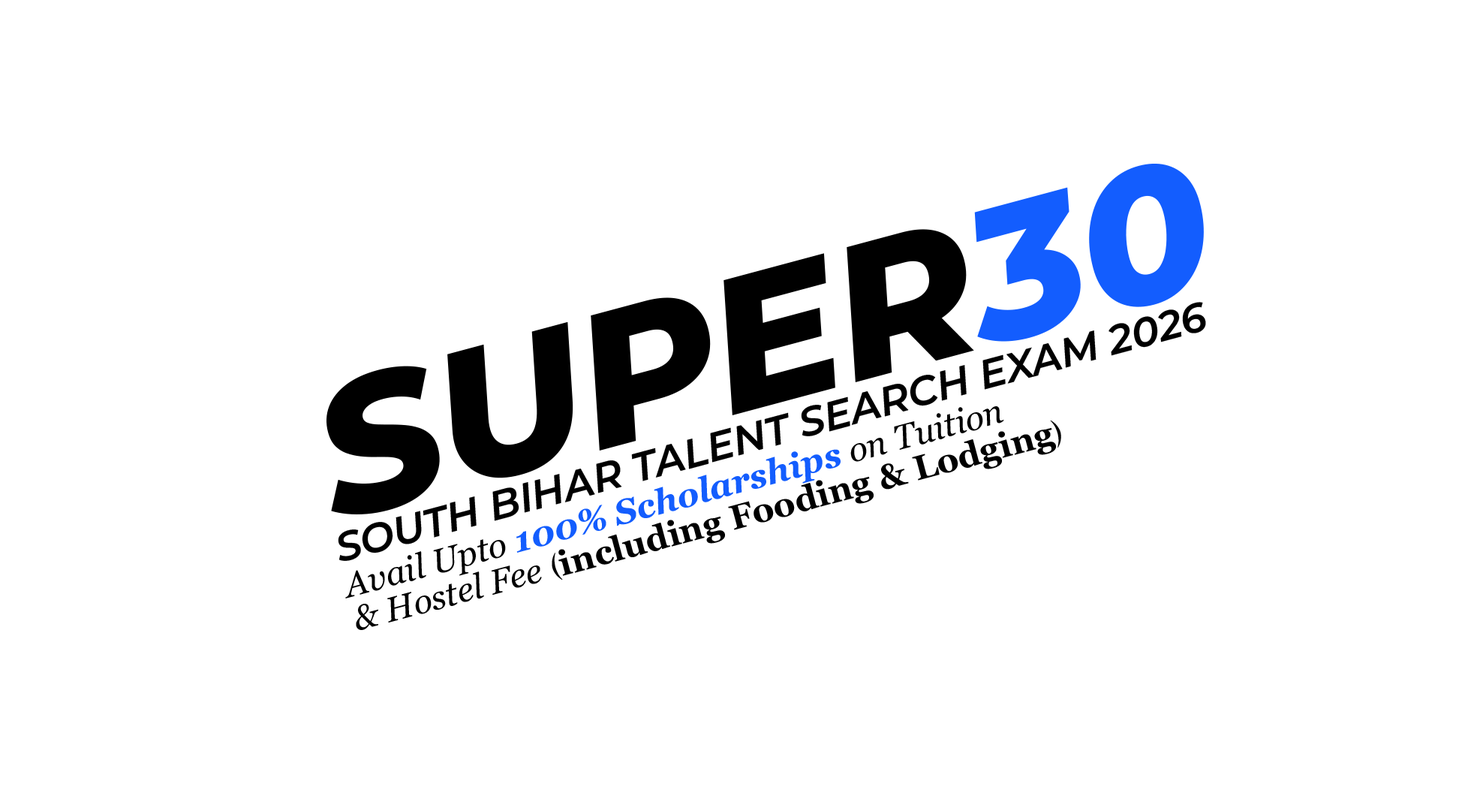
<style>
.page{position:relative;width:1471px;height:811px;background:#ffffff}
.page>*{position:absolute;margin:0}
.t1{font:189.5px "MontserratItalic-ExtraBoldItalic";color:#000000}
.t2{font:189.5px "MontserratItalic-ExtraBoldItalic";color:#135dfe}
.t3{font:40.6px "MontserratItalic-SemiBoldItalic";color:#000000}
.t4{font:34.4px/34.4px "Georgia-Bold";color:#000000}
.t5{font:34.4px/34.4px "Georgia-Italic";color:#000000}
.t6{font:34.4px/34.4px "Georgia-BoldItalic";color:#135dfe}
.t7{font:34.4px/34.4px "BaskOldFace";color:#000000}
</style>
<div class="page">
<p class="t1" style="left:326px;top:164px;width:878px;height:350px;rotate:-15deg">SUPER<span class="t2">30</span></p>
<p class="t3" style="left:338px;top:302px;width:868px;height:259px;rotate:-15deg">SOUTH BIHAR TALENT SEARCH EXAM 2026</p>
<p class="t4" style="left:345px;top:406px;width:716px;height:224px;rotate:-15deg"><span class="t5">Avail Upto </span><span class="t6">100% Scholarships </span><span class="t5">on Tuition <br>&amp; Hostel Fee</span><span class="t7"> (</span>including Fooding &amp; Lodging<span class="t7">)</span></p>
</div>
